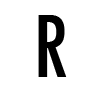
<style>
.page{position:relative;width:100px;height:100px;background:#ffffff}
.page>*{position:absolute;margin:0}
.t1{font:100px "TwCenMT-Condensed";color:#000000}
</style>
<div class="page">
<p class="t1" style="left:38px;top:15px;width:29px;height:62px">R</p>
</div>
